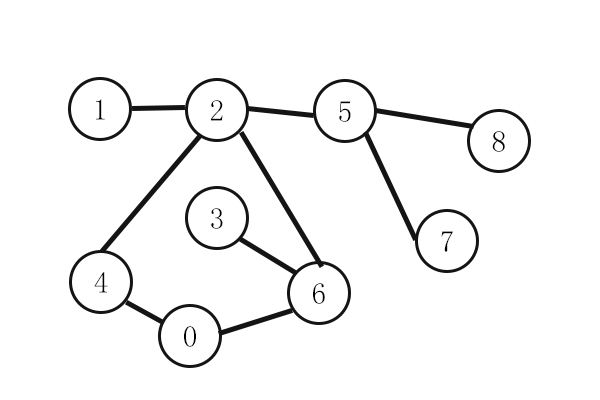
<style>
.page{position:relative;width:600px;height:400px;background:#ffffff}
.page>*{position:absolute;margin:0}
.t1{font:30px "SimSun";color:#000000}
</style>
<div class="page">
<p class="t1" style="left:96px;top:99px;width:9px;height:21px">1</p>
<p class="t1" style="left:211px;top:100px;width:12px;height:21px">2</p>
<p class="t1" style="left:339px;top:101px;width:12px;height:21px">5</p>
<p class="t1" style="left:492px;top:131px;width:13px;height:21px">8</p>
<p class="t1" style="left:211px;top:208px;width:12px;height:21px">3</p>
<p class="t1" style="left:441px;top:231px;width:12px;height:21px">7</p>
<p class="t1" style="left:94px;top:272px;width:14px;height:21px">4</p>
<p class="t1" style="left:313px;top:283px;width:12px;height:21px">6</p>
<p class="t1" style="left:184px;top:326px;width:12px;height:21px">0</p>
</div>
